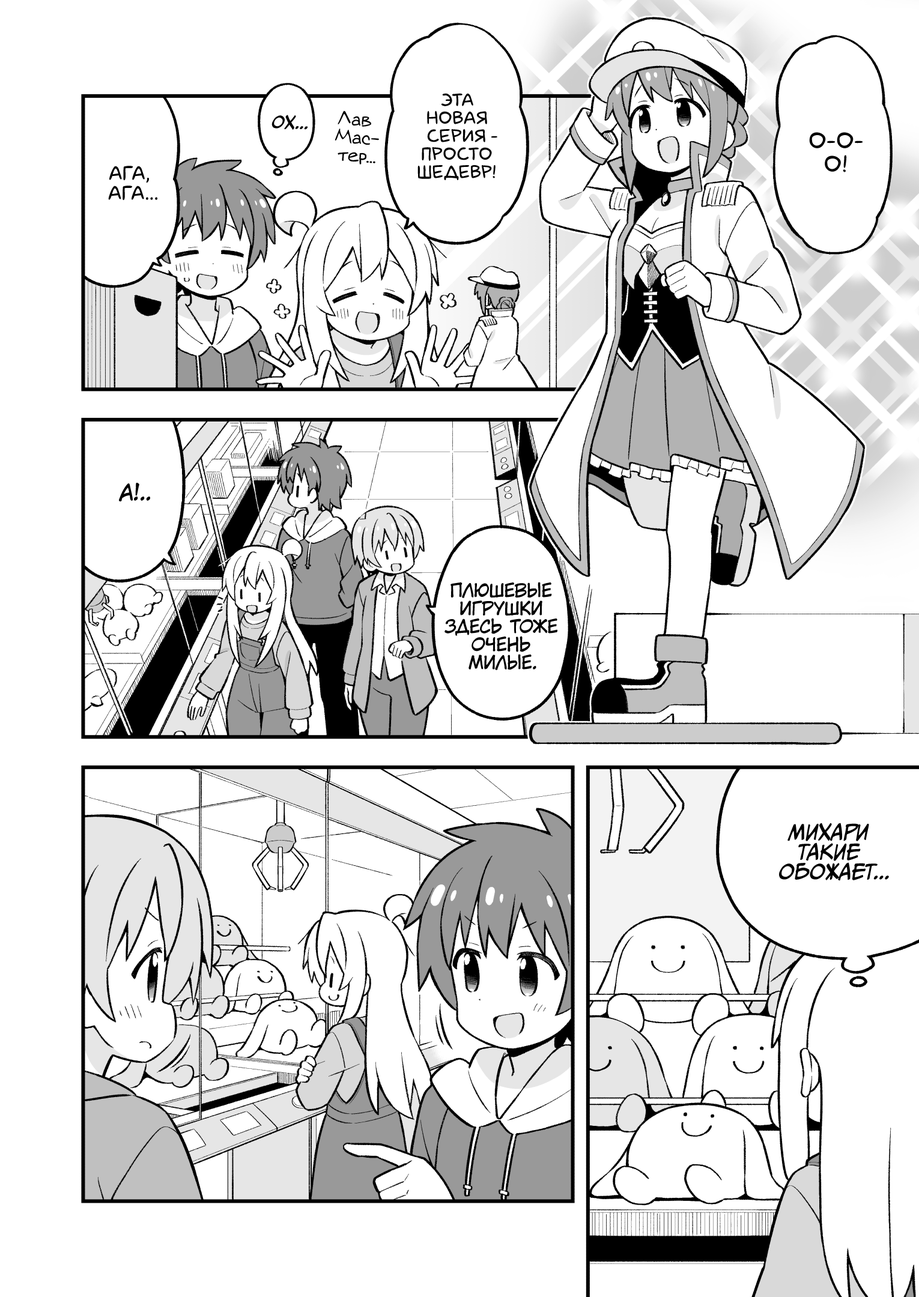
<style>
.page{position:relative;width:919px;height:1297px;background:#ffffff}
.page>*{position:absolute;margin:0}
.t1{font:18px "laCartoonerie";color:#000000;text-transform:uppercase}
.t2{font:18px "v_Augie";color:#000000}
.t3{font:16.2px "CCMeanwhile";color:#000000;text-transform:uppercase;font-style:italic}
.t4{font:23.4px "laCartoonerie";color:#000000;text-transform:uppercase}
.t5{font:19.8px "laCartoonerie";color:#000000;text-transform:uppercase}
.t6{font:21.6px "KuraiVoice2";color:#000000;text-transform:uppercase}
.t7{font:18px "KuraiVoice2";color:#000000;text-transform:uppercase}
.t8{font:19.8px "CCMeanwhile";color:#000000;text-transform:uppercase;font-style:italic}
</style>
<div class="page">
<p class="t1" style="left:417px;top:93px;width:80px;height:87px;text-align:center">Эта<br>новая<br>серия -<br>просто<br>шедевр!</p>
<p class="t2" style="left:335px;top:111px;width:44px;height:54px;text-align:center;rotate:5deg">Лав<br>Мас-<br>тер...</p>
<p class="t3" style="left:272px;top:115px;width:36px;height:15px;rotate:2deg">Ох...</p>
<p class="t4" style="left:809px;top:132px;width:54px;height:40px;text-align:center">О-о-<br>о!</p>
<p class="t5" style="left:108px;top:166px;width:49px;height:35px;text-align:center">Ага,<br>ага...</p>
<p class="t6" style="left:119px;top:483px;width:31px;height:19px">А!..</p>
<p class="t7" style="left:445px;top:582px;width:112px;height:88px;text-align:center">Плюшевые<br>игрушки<br>здесь тоже<br>очень<br>милые.</p>
<p class="t8" style="left:779px;top:823px;width:110px;height:58px;text-align:center">Михари<br>такие<br>обожает...</p>
</div>
